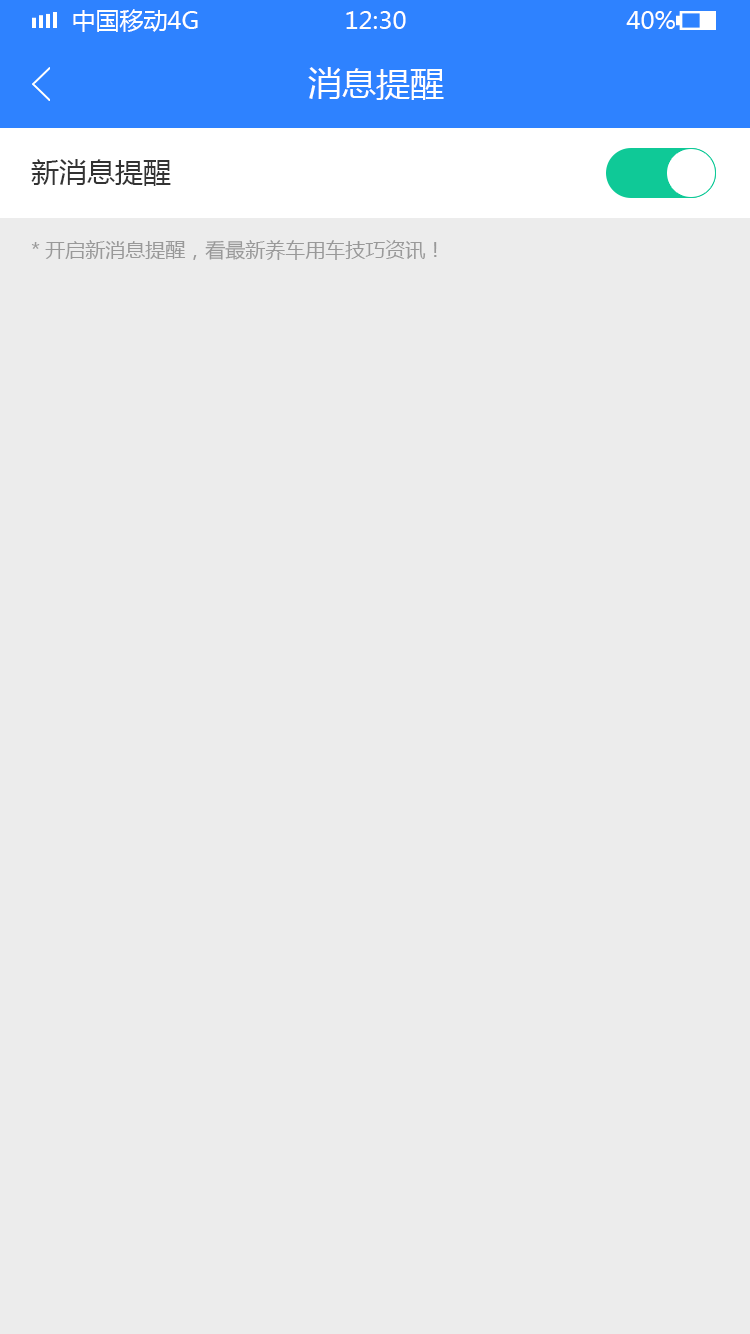
<style>
.page{position:relative;width:750px;height:1334px;background:#ececec}
.page>*{position:absolute;margin:0}
.t1{font:24px "MicrosoftYaHei";color:#ffffff;text-transform:uppercase}
.t2{font:34px "MicrosoftYaHei";color:#ffffff}
.t3{font:28px "MicrosoftYaHei";color:#333333}
.t4{font:20px "MicrosoftYaHei";color:#999999}
</style>
<div class="page">
<p class="t1" style="left:73px;top:9px;width:125px;height:23px">中国移动4G</p>
<p class="t1" style="left:346px;top:11px;width:60px;height:18px">12:30</p>
<p class="t1" style="left:626px;top:11px;width:49px;height:18px">40%</p>
<p class="t2" style="left:308px;top:67px;width:136px;height:33px">消息提醒</p>
<p class="t3" style="left:31px;top:159px;width:140px;height:27px">新消息提醒</p>
<p class="t4" style="left:31px;top:240px;width:406px;height:20px">*开启新消息提醒，看最新养车用车技巧资讯！</p>
</div>
